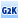
<style>
.page{position:relative;width:19px;height:19px;background:#ffffff}
.page>*{position:absolute;margin:0}
.t1{font:10px "Vecta-Bold";color:#003399}
</style>
<div class="page">
<p class="t1" style="left:2px;top:7px;width:15px;height:7px">G2K</p>
</div>
